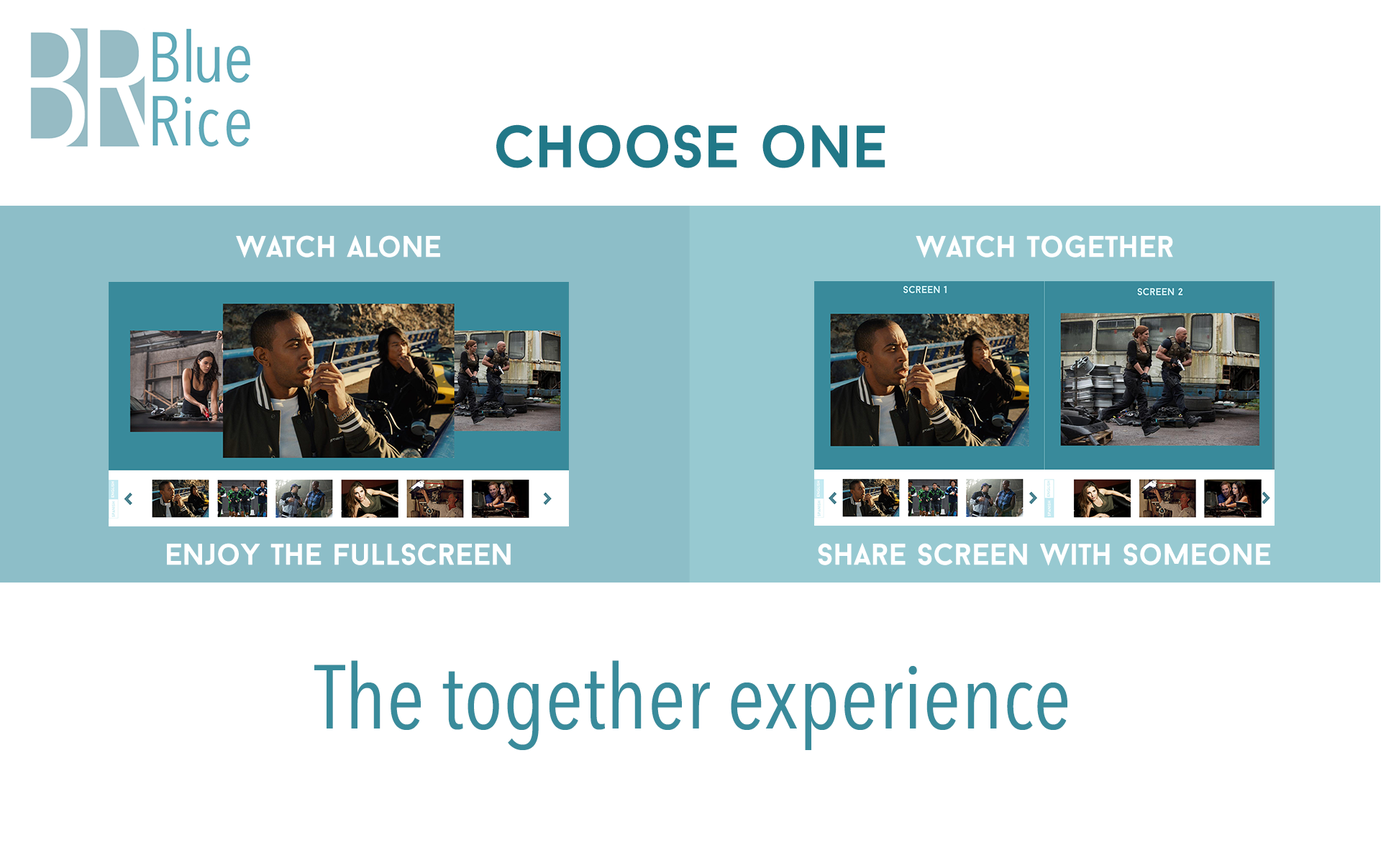
<style>
.page{position:relative;width:1381px;height:863px;background:#ffffff}
.page>*{position:absolute;margin:0}
.t1{font:60px "BaronNeueBold";color:#217888}
.t2{font:30px "BaronNeueBold";color:#ffffff}
.t3{font:89.9px "AvenirNextCondensed-Regular";color:#398b9b}
</style>
<div class="page">
<p class="t1" style="left:496px;top:124px;width:390px;height:44px">Choose one</p>
<p class="t2" style="left:236px;top:235px;width:204px;height:23px">Watch Alone</p>
<p class="t2" style="left:916px;top:235px;width:257px;height:23px">Watch together</p>
<p class="t2" style="left:167px;top:543px;width:344px;height:22px">enjoy the fullscreen</p>
<p class="t2" style="left:818px;top:543px;width:452px;height:23px">Share screen with someone</p>
<p class="t3" style="left:314px;top:660px;width:754px;height:90px">The together experience</p>
</div>
